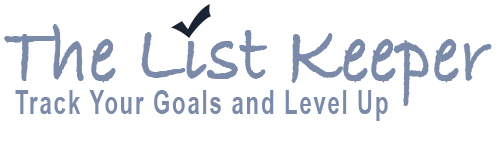
<style>
.page{position:relative;width:500px;height:150px;background:#ffffff}
.page>*{position:absolute;margin:0}
.t1{font:85.5px "BradleyHandITCTT-Bold";color:#7a8aa8;scale:0.87 1}
.t2{font:33px "ArialNarrow-Bold";letter-spacing:0.06em;color:#7a8aa8;scale:0.83 1}
</style>
<div class="page">
<p class="t1" style="left:4px;top:16px;width:488px;height:90px">The List Keeper</p>
<p class="t2" style="left:15px;top:90px;width:373px;height:31px">Track Your Goals and Level Up</p>
</div>
